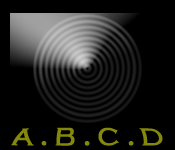
<style>
.page{position:relative;width:175px;height:150px;background:#000000}
.page>*{position:absolute;margin:0}
.t1{font:24px "CopperplateGothic-Bold";color:#85890b}
</style>
<div class="page">
<p class="t1" style="left:11px;top:127px;width:152px;height:19px">A . B . C . D</p>
</div>
